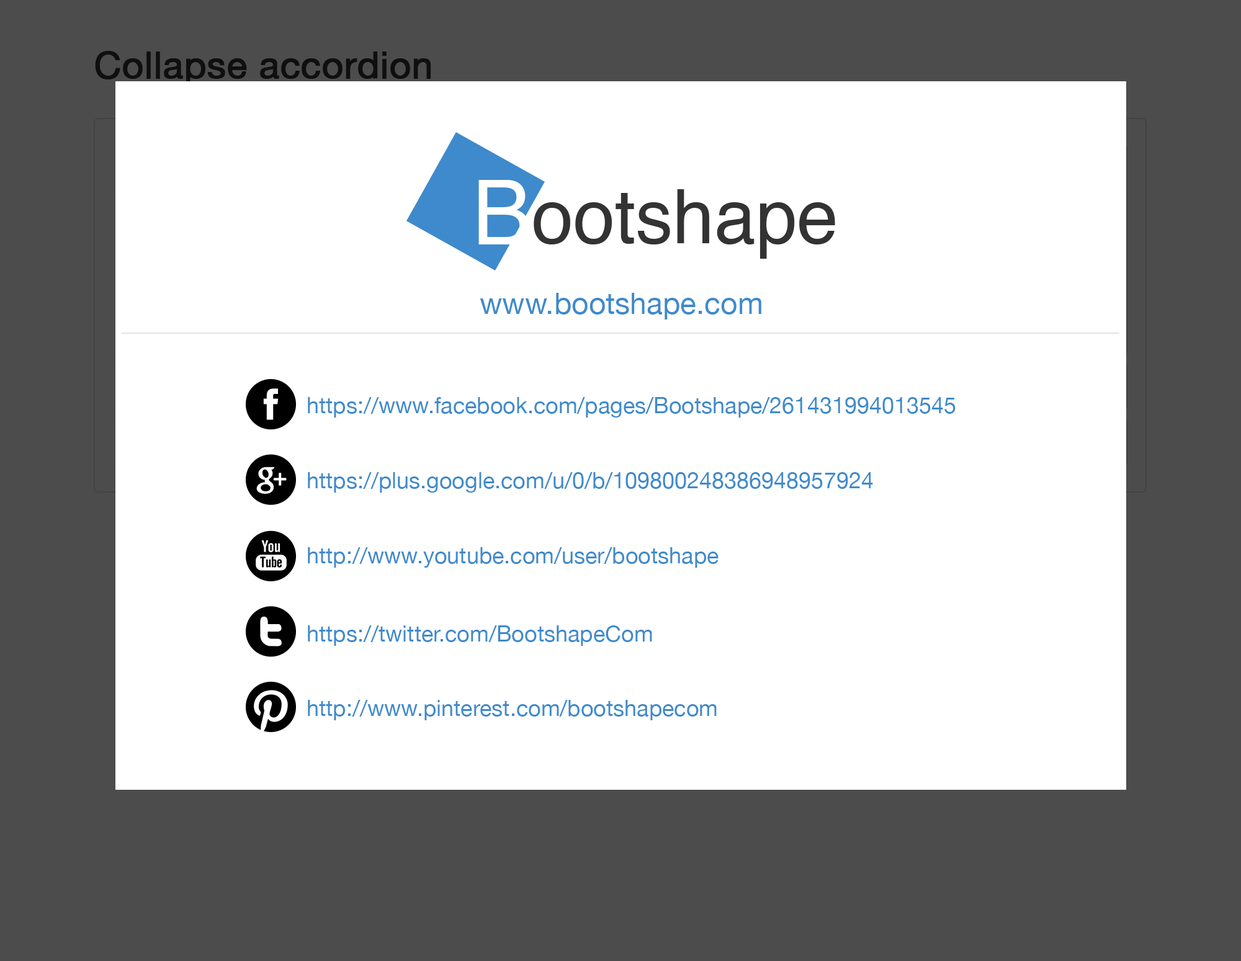
<style>
.page{position:relative;width:1241px;height:961px;background:#ffffff}
.page>*{position:absolute;margin:0}
.t1{font:37.2px "HelveticaNeue";color:#0f0f0f;font-weight:bold}
.t2{font:29.8px "HelveticaNeue";color:#3e8acc}
.t3{font:22.3px "HelveticaNeue";color:#3e8acc}
</style>
<div class="page">
<p class="t1" style="left:95px;top:51px;width:336px;height:35px">Collapse accordion</p>
<p class="t2" style="left:480px;top:293px;width:281px;height:27px">www.bootshape.com</p>
<p class="t3" style="left:308px;top:397px;width:647px;height:21px">https://www.facebook.com/pages/Bootshape/261431994013545</p>
<p class="t3" style="left:308px;top:472px;width:565px;height:21px">https://plus.google.com/u/0/b/109800248386948957924</p>
<p class="t3" style="left:308px;top:547px;width:410px;height:21px">http://www.youtube.com/user/bootshape</p>
<p class="t3" style="left:308px;top:625px;width:344px;height:21px">https://twitter.com/BootshapeCom</p>
<p class="t3" style="left:308px;top:700px;width:409px;height:20px">http://www.pinterest.com/bootshapecom</p>
</div>
